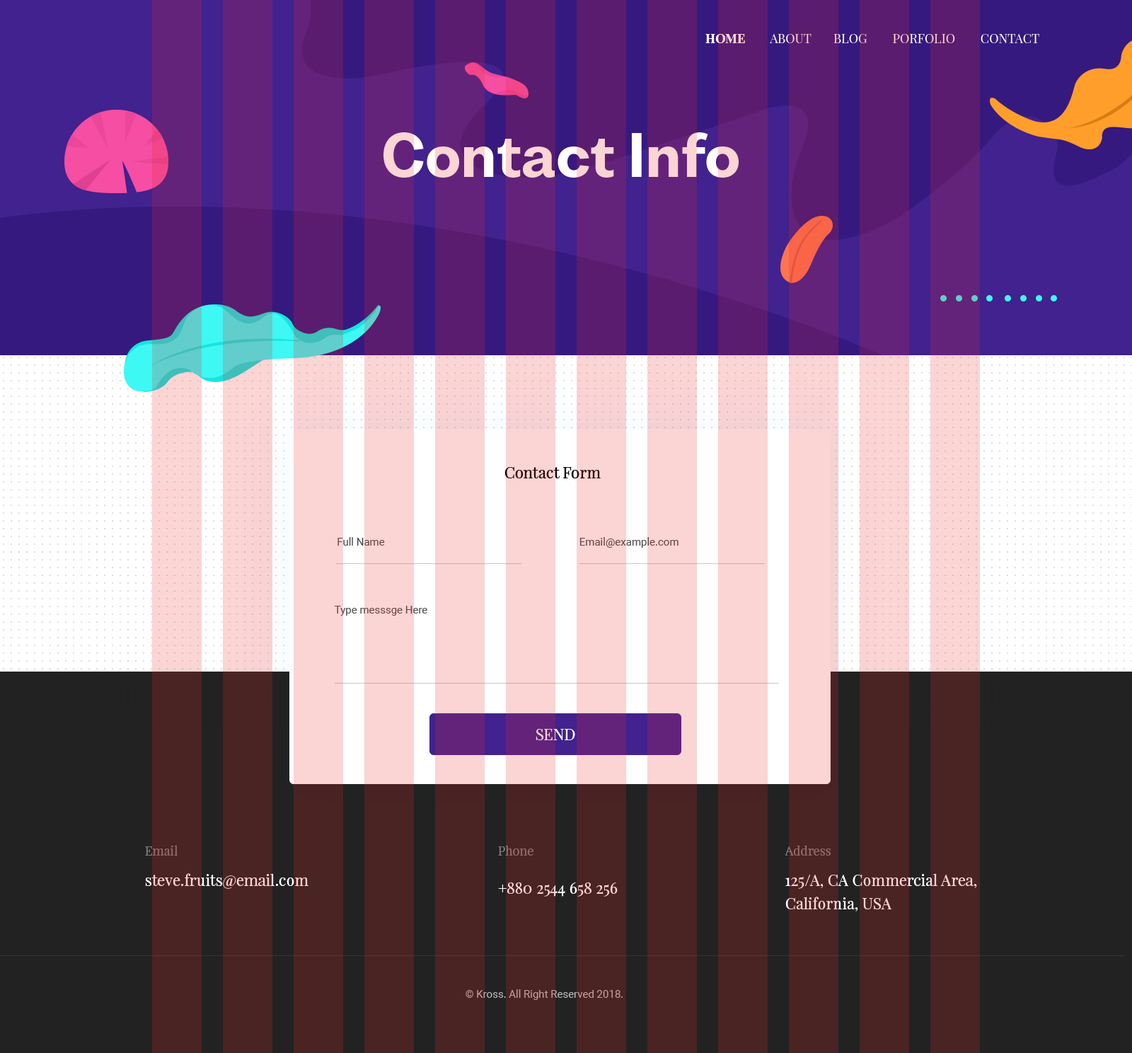
<style>
.page{position:relative;width:1132px;height:1053px}
.page>*{position:absolute;margin:0}
.t1{font:12.7px "PlayfairDisplay-Regular"}
.t2{font:12.7px "PlayfairDisplay-Bold"}
.t3{font:56.6px "BwNistaGrot-xBd";color:#fbd4d4}
.t4{font:15.6px "PlayfairDisplay-Regular";color:#2f0808}
.t5{font:10.6px "Roboto-Regular"}
.t6{font:10.6px "Roboto-Regular";color:#6c4445}
.t7{font:15.6px "PlayfairDisplay-Regular"}
.t8{font:12.7px "PlayfairDisplay-Regular";color:#91696a}
.t9{font:15.6px "PlayfairDisplay-Regular";color:#fbd4d4}
.t10{font:15.6px/23.4px "PlayfairDisplay-Regular";color:#fbd4d4}
</style>
<div class="page">
<p class="t1" style="left:706px;top:34px;width:334px;height:9px"><span class="t2">HOME </span>       ABOUT       BLOG        PORFOLIO        CONTACT</p>
<p class="t3" style="left:384px;top:132px;width:355px;height:46px">Contact Info</p>
<p class="t4" style="left:505px;top:467px;width:96px;height:11px">Contact Form</p>
<p class="t5" style="left:338px;top:537px;width:47px;height:9px">Full Name</p>
<p class="t6" style="left:580px;top:537px;width:99px;height:11px">Email@example.com</p>
<p class="t5" style="left:335px;top:606px;width:92px;height:10px">Type messsge Here</p>
<p class="t7" style="left:536px;top:729px;width:39px;height:11px">SEND</p>
<p class="t8" style="left:145px;top:845px;width:33px;height:11px">Email</p>
<p class="t8" style="left:498px;top:845px;width:36px;height:11px">Phone</p>
<p class="t8" style="left:785px;top:845px;width:47px;height:11px">Address</p>
<p class="t9" style="left:145px;top:873px;width:164px;height:16px">steve.fruits@email.com</p>
<p class="t10" style="left:786px;top:873px;width:191px;height:39px">125/A, CA Commercial Area, <br>California, USA</p>
<p class="t9" style="left:498px;top:883px;width:120px;height:14px">+880 2544 658 256</p>
<p class="t5" style="left:466px;top:989px;width:157px;height:11px">© Kross. All Right Reserved 2018.</p>
</div>
